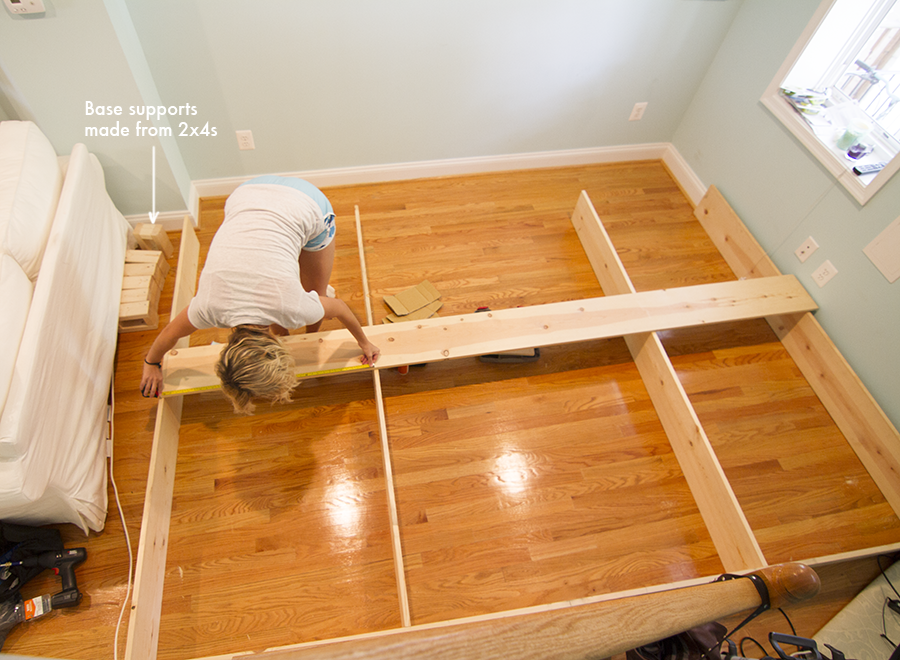
<style>
.page{position:relative;width:900px;height:660px}
.page>*{position:absolute;margin:0}
.t1{font:18px "Futura-Medium";color:#ffffff}
</style>
<div class="page">
<p class="t1" style="left:85px;top:101px;width:133px;height:35px">Base supports <br>made from 2x4s</p>
</div>
